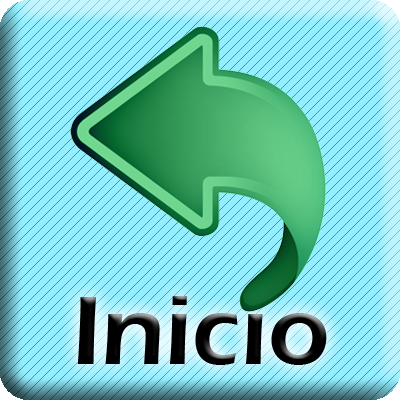
<style>
.page{position:relative;width:400px;height:400px;background:#93eeff}
.page>*{position:absolute;margin:0}
.t1{font:100px "ErasITC-Demi";color:#000000}
</style>
<div class="page">
<p class="t1" style="left:77px;top:296px;width:250px;height:69px">Inicio</p>
</div>
